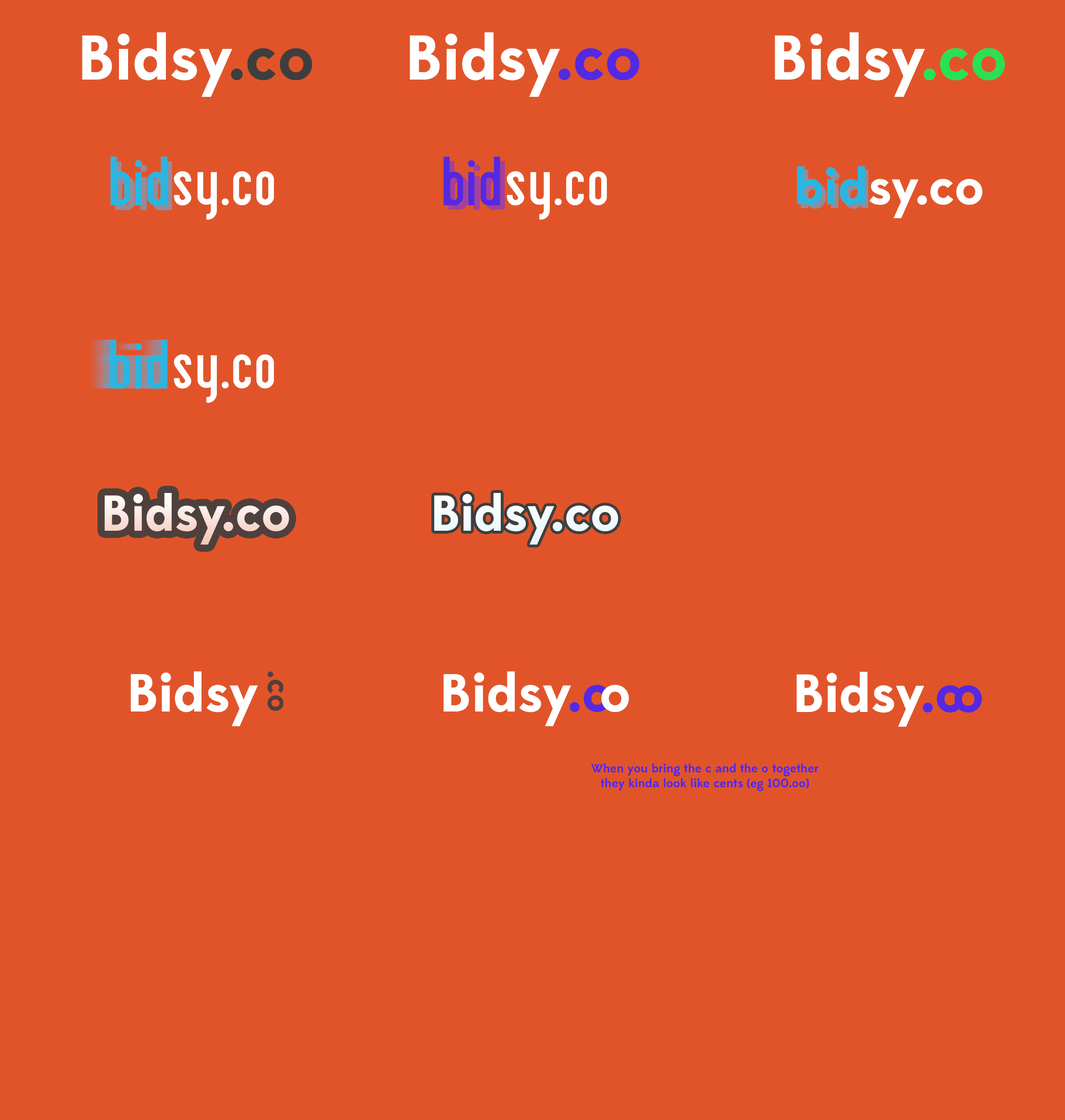
<style>
.page{position:relative;width:1065px;height:1120px;background:#e15429}
.page>*{position:absolute;margin:0}
.t1{font:62.9px "Edmondsans-Bold";letter-spacing:-0.005em;color:#ffffff}
.t2{font:62.9px "Edmondsans-Bold";letter-spacing:-0.005em;color:#3e3e3e}
.t3{font:62.9px "Edmondsans-Bold";letter-spacing:-0.005em;color:#5429e1}
.t4{font:62.9px "Edmondsans-Bold";letter-spacing:-0.005em;color:#29e154}
.t5{font:62.8px "Airplane";letter-spacing:-0.005em;color:#ffffff}
.t6{font:62.8px "Airplane";letter-spacing:-0.005em;color:#29b6e1}
.t7{font:62.8px "Airplane";letter-spacing:-0.005em;color:#5429e1}
.t8{font:50.6px "Edmondsans-Bold";letter-spacing:-0.005em;color:#ffffff}
.t9{font:50.6px "Edmondsans-Bold";letter-spacing:-0.005em;color:#29b6e1}
.t10{font:50.6px "Edmondsans-Bold";letter-spacing:-0.005em}
.t11{font:50.3px "Edmondsans-Bold";letter-spacing:-0.005em;color:#fae5de}
.t12{font:50.3px "Edmondsans-Bold";letter-spacing:-0.005em;color:#ffffff}
.t13{font:53.3px "Edmondsans-Bold";letter-spacing:-0.005em;color:#ffffff}
.t14{font:31.4px "Edmondsans-Bold";letter-spacing:-0.005em;color:#4e403c}
.t15{font:53.3px "Edmondsans-Bold";letter-spacing:-0.005em;color:#5429e1}
.t16{font:53.4px "Edmondsans-Bold";letter-spacing:-0.005em;color:#ffffff}
.t17{font:53.4px "Edmondsans-Bold";letter-spacing:-0.005em;color:#5429e1}
.t18{font:12.2px "Edmondsans-Bold";letter-spacing:-0.005em;color:#5429e1}
</style>
<div class="page">
<p class="t1" style="left:82px;top:32px;width:230px;height:65px">Bidsy<span class="t2">.co</span></p>
<p class="t1" style="left:410px;top:32px;width:229px;height:65px">Bidsy<span class="t3">.co</span></p>
<p class="t1" style="left:774px;top:32px;width:231px;height:65px">Bidsy<span class="t4">.co</span></p>
<p class="t5" style="left:110px;top:156px;width:164px;height:64px"><span class="t6">bid</span>sy.co</p>
<p class="t5" style="left:443px;top:156px;width:164px;height:64px"><span class="t7">bid</span>sy.co</p>
<p class="t8" style="left:796px;top:166px;width:186px;height:52px"><span class="t9">bid</span>sy.co</p>
<p class="t10" style="left:800px;top:170px;width:68px;height:39px">bid</p>
<p class="t6" style="left:108px;top:339px;width:57px;height:50px;opacity:0.2">bid</p>
<p class="t5" style="left:110px;top:339px;width:164px;height:64px"><span class="t6">bid</span>sy.co</p>
<p class="t11" style="left:105px;top:493px;width:184px;height:52px">Bidsy.co</p>
<p class="t12" style="left:434px;top:493px;width:184px;height:52px">Bidsy.co</p>
<p class="t13" style="left:130px;top:671px;width:128px;height:55px">Bidsy</p>
<p class="t14" style="left:267px;top:671px;width:16px;height:40px;rotate:90deg">.co</p>
<p class="t13" style="left:443px;top:671px;width:165px;height:55px">Bidsy<span class="t15">.c</span></p>
<p class="t16" style="left:796px;top:672px;width:164px;height:55px">Bidsy<span class="t17">.c</span></p>
<p class="t13" style="left:601px;top:685px;width:28px;height:27px">o</p>
<p class="t17" style="left:954px;top:685px;width:28px;height:28px">o</p>
<p class="t18" style="left:591px;top:763px;width:227px;height:28px;text-align:center">When you bring the c and the o together<br>they kinda look like cents (eg 100.oo)</p>
</div>
